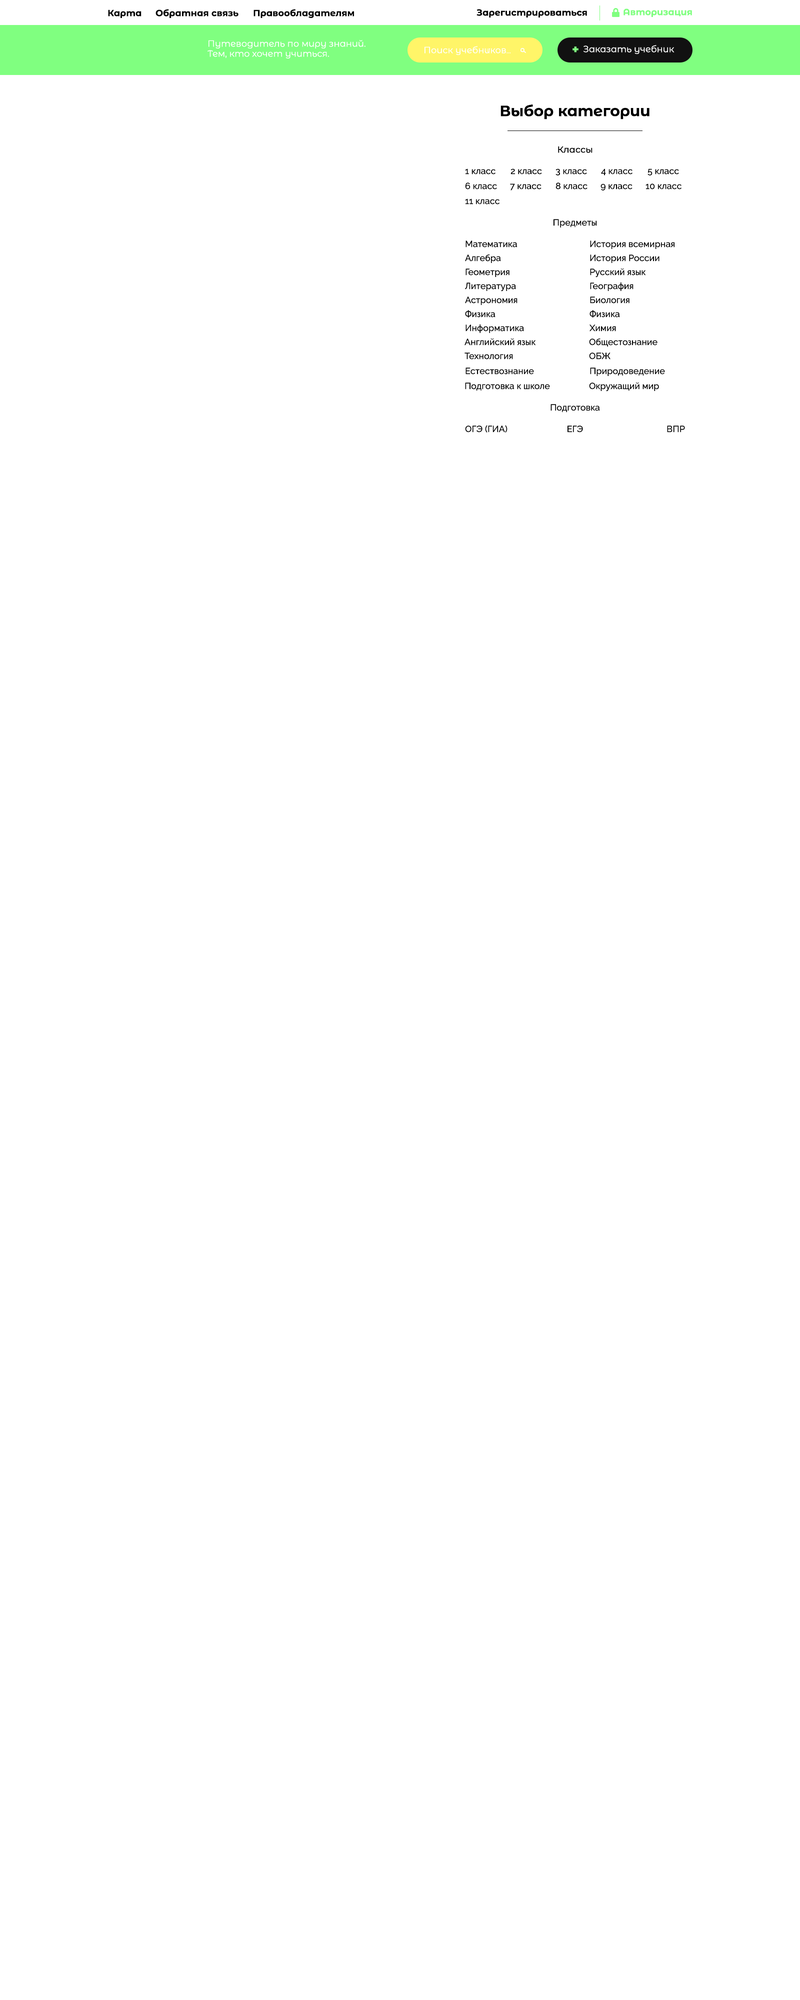
<style>
.page{position:relative;width:800px;height:2000px;background:#ffffff}
.page>*{position:absolute;margin:0}
.t1{font:9px "Montserrat-Bold";color:#000000;font-variant:small-caps}
.t2{font:9px "Montserrat-Bold";color:#80ff80;font-variant:small-caps}
.t3{font:9px "Montserrat-Regular";color:#ffffff;font-variant:small-caps}
.t4{font:7px "Montserrat-Regular";color:#ffffff;font-variant:small-caps}
.t5{font:11px "Montserrat-Black";color:#80ff80;font-variant:small-caps}
.t6{font:15px "Montserrat-Bold";color:#000000;font-variant:small-caps}
.t7{font:9px "Montserrat-Medium";color:#000000;font-variant:small-caps}
.t8{font:9px "Raleway-Medium";color:#000000;font-variant:small-caps}
</style>
<div class="page">
<p class="t1" style="left:108px;top:10px;width:34px;height:8px">Карта</p>
<p class="t1" style="left:156px;top:9px;width:82px;height:9px">Обратная связь</p>
<p class="t1" style="left:254px;top:9px;width:100px;height:9px">Правообладателям</p>
<p class="t1" style="left:476px;top:9px;width:111px;height:9px">Зарегистрироваться</p>
<p class="t2" style="left:624px;top:8px;width:68px;height:9px">Авторизация</p>
<p class="t3" style="left:208px;top:40px;width:158px;height:8px">Путеводитель по миру знаний.</p>
<p class="t3" style="left:208px;top:50px;width:121px;height:8px">Тем, кто хочет учиться.</p>
<p class="t3" style="left:424px;top:46px;width:87px;height:9px"><span class="t4"> </span>Поиск учебников<span class="t4">...</span></p>
<p class="t5" style="left:572px;top:46px;width:6px;height:6px">+</p>
<p class="t3" style="left:584px;top:45px;width:90px;height:9px">Заказать учебник</p>
<p class="t6" style="left:500px;top:104px;width:150px;height:16px">Выбор категории</p>
<p class="t7" style="left:558px;top:146px;width:34px;height:7px">Классы</p>
<p class="t8" style="left:465px;top:168px;width:31px;height:6px">1 класс</p>
<p class="t8" style="left:510px;top:168px;width:32px;height:6px">2 класс</p>
<p class="t8" style="left:556px;top:168px;width:31px;height:8px">3 класс</p>
<p class="t8" style="left:601px;top:168px;width:31px;height:8px">4 класс</p>
<p class="t8" style="left:648px;top:168px;width:31px;height:8px">5 класс</p>
<p class="t8" style="left:465px;top:182px;width:32px;height:8px">6 класс</p>
<p class="t8" style="left:510px;top:184px;width:32px;height:6px">7 класс</p>
<p class="t8" style="left:556px;top:182px;width:32px;height:8px">8 класс</p>
<p class="t8" style="left:600px;top:184px;width:32px;height:6px">9 класс</p>
<p class="t8" style="left:646px;top:184px;width:36px;height:6px">10 класс</p>
<p class="t8" style="left:465px;top:198px;width:35px;height:6px">11 класс</p>
<p class="t8" style="left:554px;top:219px;width:43px;height:9px">Предметы</p>
<p class="t8" style="left:466px;top:240px;width:51px;height:8px">Математика</p>
<p class="t8" style="left:590px;top:240px;width:84px;height:9px">История всемирная</p>
<p class="t8" style="left:465px;top:254px;width:36px;height:9px">Алгебра</p>
<p class="t8" style="left:590px;top:254px;width:70px;height:9px">История России</p>
<p class="t8" style="left:466px;top:268px;width:44px;height:9px">Геометрия</p>
<p class="t8" style="left:590px;top:268px;width:56px;height:10px">Русский язык</p>
<p class="t8" style="left:465px;top:282px;width:51px;height:10px">Литература</p>
<p class="t8" style="left:590px;top:282px;width:44px;height:9px">География</p>
<p class="t8" style="left:465px;top:296px;width:53px;height:9px">Астрономия</p>
<p class="t8" style="left:590px;top:296px;width:40px;height:8px">Биология</p>
<p class="t8" style="left:465px;top:310px;width:31px;height:8px">Физика</p>
<p class="t8" style="left:590px;top:310px;width:30px;height:8px">Физика</p>
<p class="t8" style="left:466px;top:324px;width:58px;height:9px">Информатика</p>
<p class="t8" style="left:590px;top:324px;width:26px;height:8px">Химия</p>
<p class="t8" style="left:464px;top:338px;width:72px;height:8px">Английский язык</p>
<p class="t8" style="left:589px;top:338px;width:69px;height:9px">Общестознание</p>
<p class="t8" style="left:464px;top:352px;width:49px;height:8px">Технология</p>
<p class="t8" style="left:589px;top:352px;width:21px;height:8px">ОБЖ</p>
<p class="t8" style="left:466px;top:368px;width:68px;height:6px">Естествознание</p>
<p class="t8" style="left:590px;top:368px;width:75px;height:8px">Природоведение</p>
<p class="t8" style="left:465px;top:382px;width:85px;height:9px">Подготовка к школе</p>
<p class="t8" style="left:589px;top:382px;width:70px;height:10px">Окружащий мир</p>
<p class="t8" style="left:550px;top:404px;width:50px;height:8px">Подготовка</p>
<p class="t8" style="left:465px;top:425px;width:43px;height:7px">ОГЭ (ГИА)</p>
<p class="t8" style="left:568px;top:426px;width:15px;height:6px">ЕГЭ</p>
<p class="t8" style="left:667px;top:426px;width:18px;height:6px">ВПР</p>
</div>
